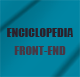
<style>
.page{position:relative;width:80px;height:77px}
.page>*{position:absolute;margin:0}
.t1{font:11.9px "Impact";color:#2b202a}
.t2{font:11.9px "Impact";color:#463845}
</style>
<div class="page">
<p class="t1" style="left:7px;top:28px;width:66px;height:9px">ENCICLOPEDIA</p>
<p class="t2" style="left:14px;top:46px;width:52px;height:9px">FRONT-END</p>
</div>
